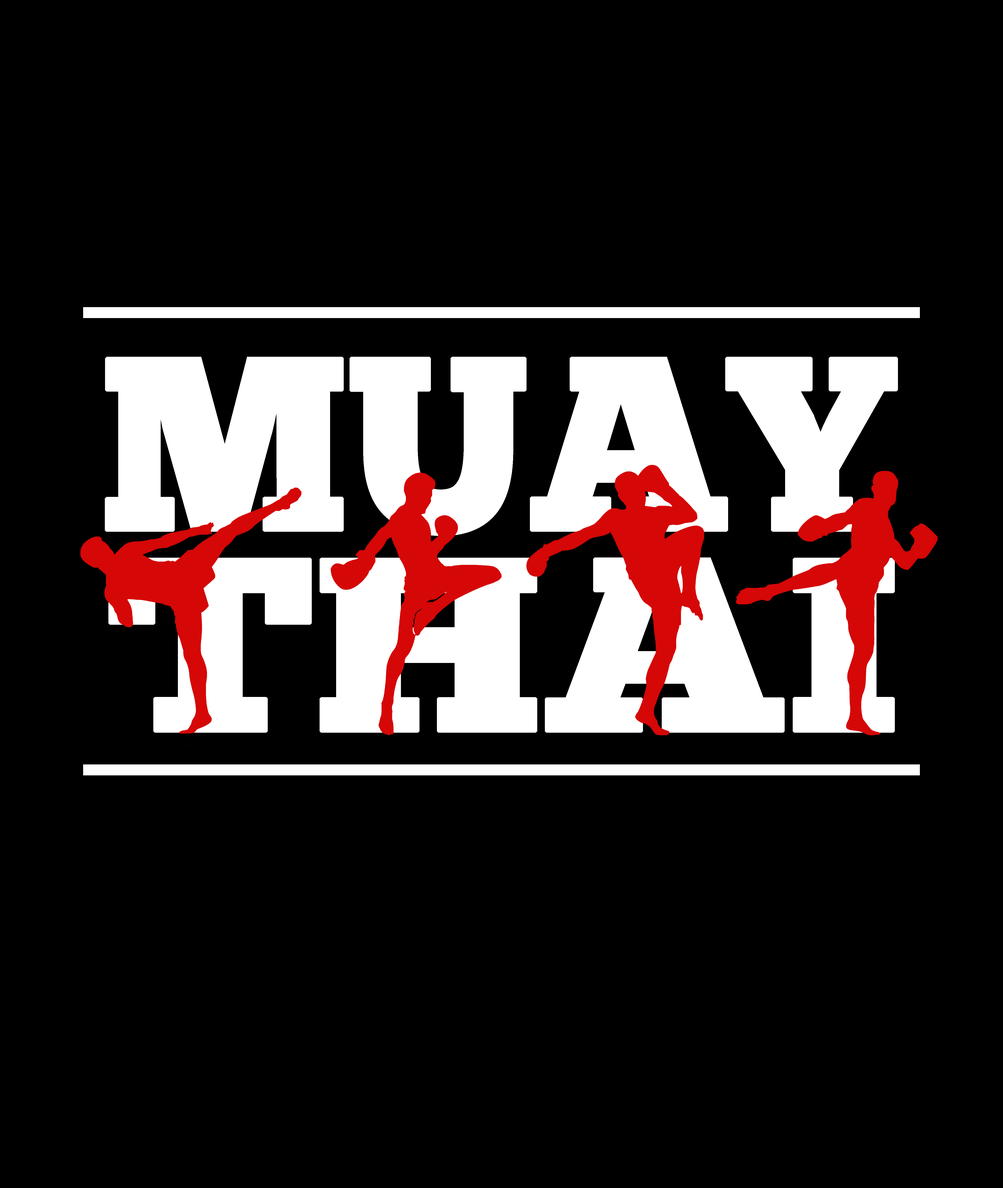
<style>
.page{position:relative;width:1003px;height:1188px;background:#000000}
.page>*{position:absolute;margin:0}
.t1{font:246px "ChunkFive";letter-spacing:-0.03em;color:#ffffff;font-weight:bold}
.t2{font:246.1px "ChunkFive";letter-spacing:-0.03em;color:#ffffff;font-weight:bold;scale:1.21 1}
</style>
<div class="page">
<p class="t1" style="left:105px;top:357px;width:793px;height:179px">MUAY</p>
<p class="t2" style="left:108px;top:558px;width:787px;height:175px">THAI</p>
</div>
